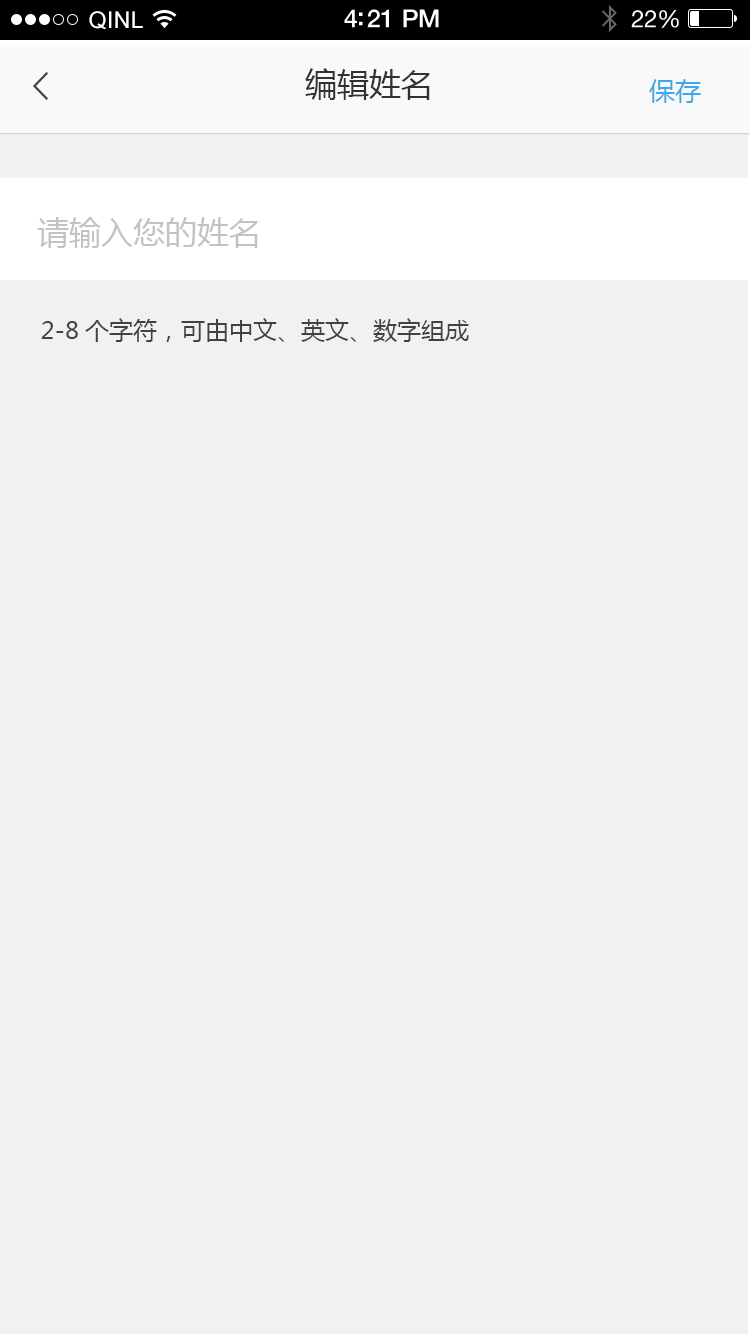
<style>
.page{position:relative;width:750px;height:1334px;background:#f1f1f1}
.page>*{position:absolute;margin:0}
.t1{font:23px "ArialUnicodeMS";letter-spacing:0.02em;color:#ffffff}
.t2{font:25px "HelveticaNeue-Medium";letter-spacing:-0.02em;color:#ffffff}
.t3{font:24px "HelveticaNeue";letter-spacing:-0.02em;color:#ffffff}
.t4{font:32px "MicrosoftYaHei";color:#323232}
.t5{font:26px "MicrosoftYaHei";color:#3da7ea}
.t6{font:32px "MicrosoftYaHei";color:#c3c3c3}
.t7{font:24px "MicrosoftYaHei";color:#424242}
</style>
<div class="page">
<p class="t1" style="left:89px;top:11px;width:54px;height:19px">QINL</p>
<p class="t1" style="left:89px;top:11px;width:54px;height:19px">QINL</p>
<p class="t2" style="left:344px;top:9px;width:95px;height:19px">4:21 PM</p>
<p class="t2" style="left:344px;top:9px;width:95px;height:19px">4:21 PM</p>
<p class="t3" style="left:631px;top:10px;width:48px;height:18px">22%</p>
<p class="t3" style="left:631px;top:10px;width:48px;height:18px">22%</p>
<p class="t4" style="left:305px;top:68px;width:125px;height:32px">编辑姓名</p>
<p class="t5" style="left:649px;top:79px;width:52px;height:24px">保存</p>
<p class="t6" style="left:37px;top:217px;width:221px;height:31px">请输入您的姓名</p>
<p class="t7" style="left:41px;top:318px;width:428px;height:24px">2-8个字符，可由中文、英文、数字组成</p>
</div>
